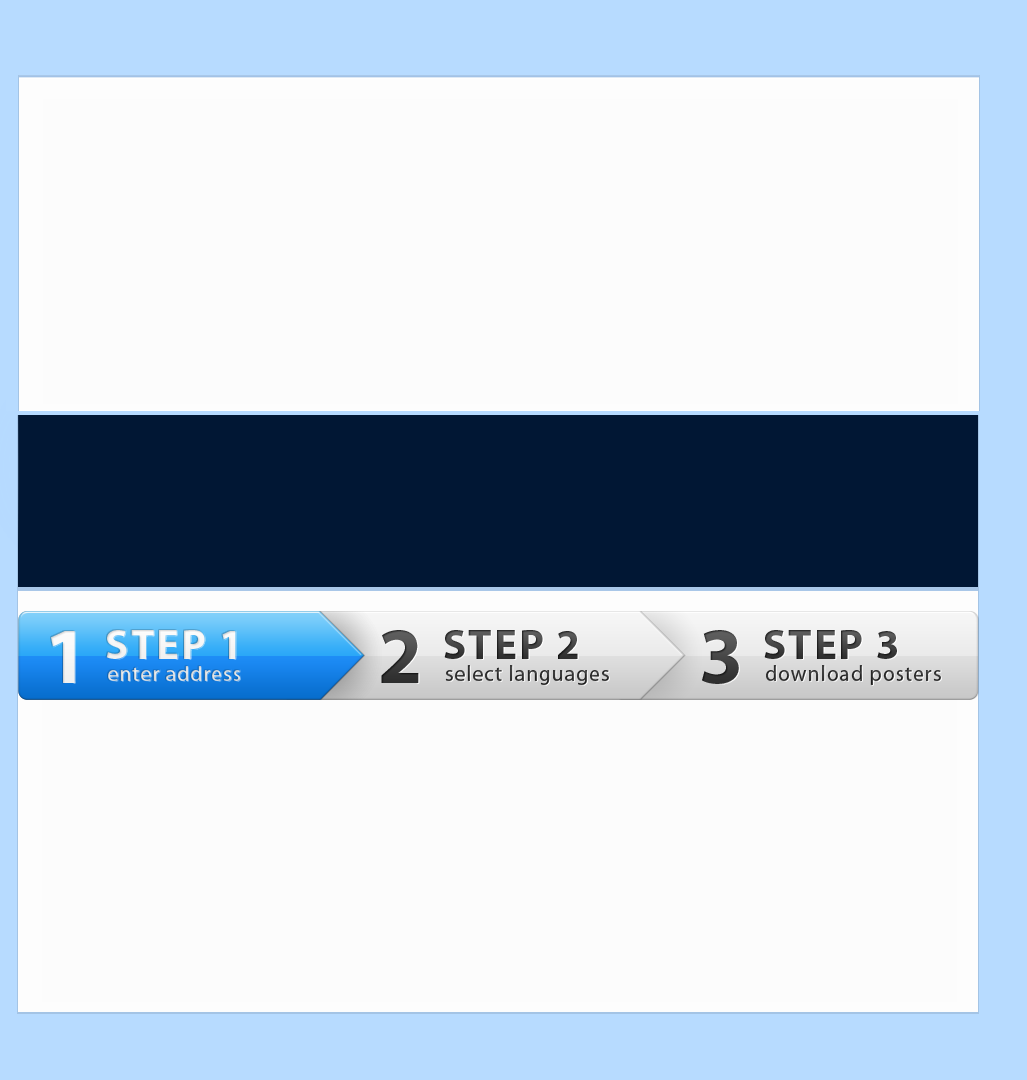
<style>
.page{position:relative;width:1027px;height:1080px;background:#fcfcfc}
.page>*{position:absolute;margin:0}
.t1{font:42.7px "MyriadPro-Bold";letter-spacing:0.05em;color:#f3f3f3;text-transform:uppercase}
.t2{font:42.6px "MyriadPro-Bold";letter-spacing:0.05em;color:#f3f3f3;text-transform:uppercase}
.t3{font:79.9px "MyriadPro-Bold";letter-spacing:0.05em;text-transform:uppercase}
.t4{font:42.7px "MyriadPro-Bold";letter-spacing:0.05em;text-transform:uppercase}
.t5{font:79.9px "MyriadPro-Bold";letter-spacing:0.05em;color:#424242;text-transform:uppercase}
.t6{font:79.9px "MyriadPro-Bold";letter-spacing:0.05em;color:#f5f5f5;text-transform:uppercase}
.t7{font:21.3px "MyriadPro-Regular";letter-spacing:0.05em;color:#dedfdf}
.t8{font:21.3px "MyriadPro-Regular";letter-spacing:0.05em;color:#2e2e2e}
.t9{font:21.3px "MyriadPro-Regular";letter-spacing:0.05em;color:#2f2f2f}
.t10{font:21.3px "MyriadPro-Regular";letter-spacing:0.05em;color:#dfdfdf}
</style>
<div class="page">
<p class="t1" style="left:106px;top:630px;width:130px;height:29px">step 1</p>
<p class="t2" style="left:106px;top:630px;width:130px;height:29px">step 1</p>
<p class="t3" style="left:381px;top:630px;width:38px;height:53px">2</p>
<p class="t4" style="left:444px;top:630px;width:134px;height:29px">step 2</p>
<p class="t5" style="left:702px;top:630px;width:37px;height:54px">3</p>
<p class="t4" style="left:764px;top:630px;width:133px;height:29px">step 3</p>
<p class="t6" style="left:51px;top:631px;width:24px;height:52px">1</p>
<p class="t6" style="left:51px;top:631px;width:24px;height:52px">1</p>
<p class="t7" style="left:108px;top:665px;width:133px;height:16px">enter address</p>
<p class="t8" style="left:445px;top:665px;width:164px;height:20px">select languages</p>
<p class="t9" style="left:766px;top:665px;width:175px;height:20px">download posters</p>
<p class="t10" style="left:108px;top:666px;width:132px;height:15px">enter address</p>
</div>
